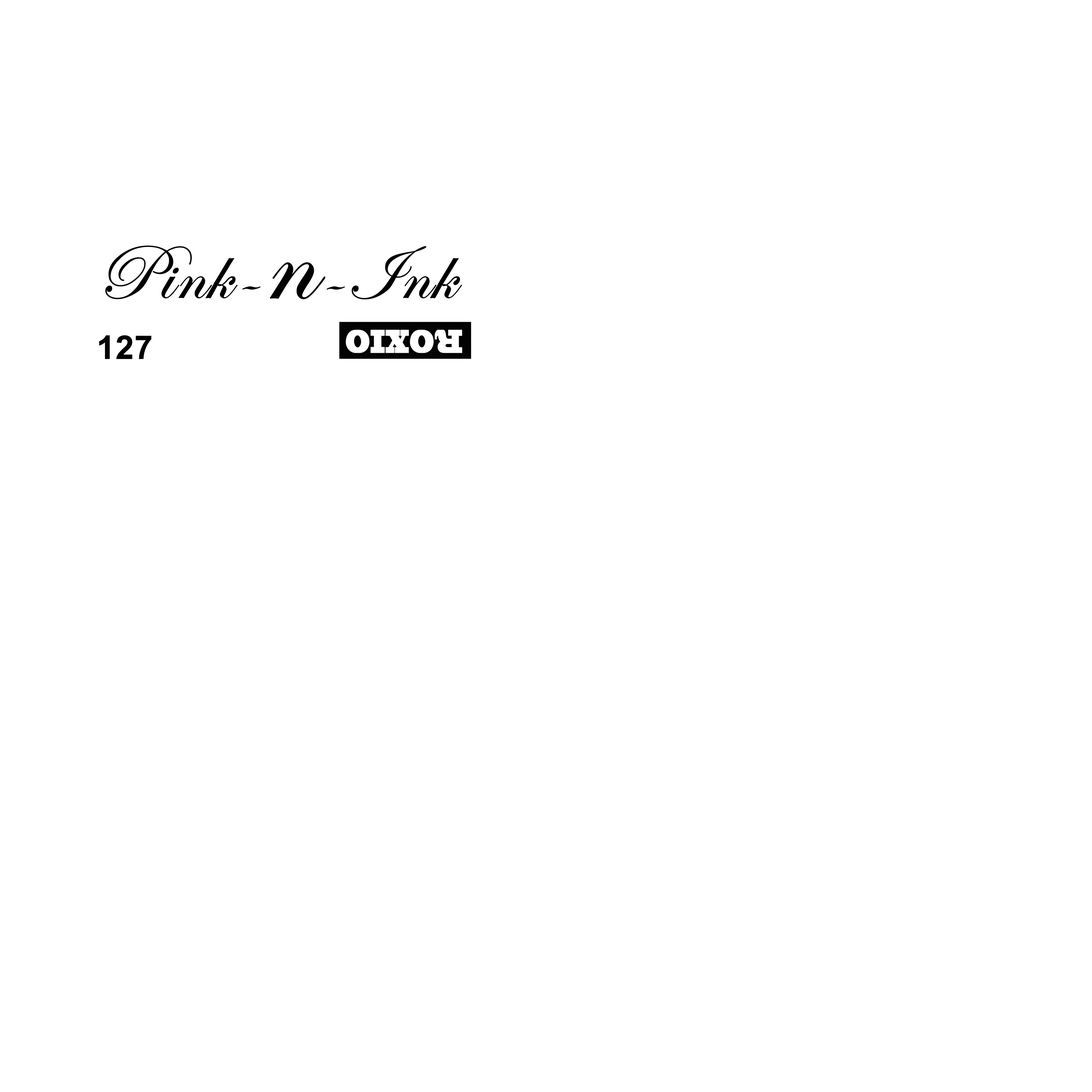
<style>
.page{position:relative;width:1092px;height:1092px;background:#ffffff}
.page>*{position:absolute;margin:0}
.t1{font:78px "EdwardianScriptITC";color:#010101;font-weight:bold}
.t2{font:130px "EdwardianScriptITC";color:#010101;font-weight:bold}
.t3{font:32.5px "Arial-BoldMT";color:#010101;font-weight:bold}
</style>
<div class="page">
<p class="t1" style="left:105px;top:245px;width:357px;height:55px">Pink-<span class="t2">n</span>-Ink</p>
<p class="t3" style="left:99px;top:335px;width:52px;height:24px">127</p>
</div>
